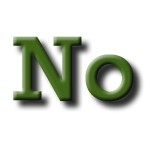
<style>
.page{position:relative;width:150px;height:150px;background:#ffffff}
.page>*{position:absolute;margin:0}
.t1{font:91.7px "Rockwell";font-weight:bold}
</style>
<div class="page">
<p class="t1" style="left:13px;top:36px;width:121px;height:66px">No</p>
</div>
